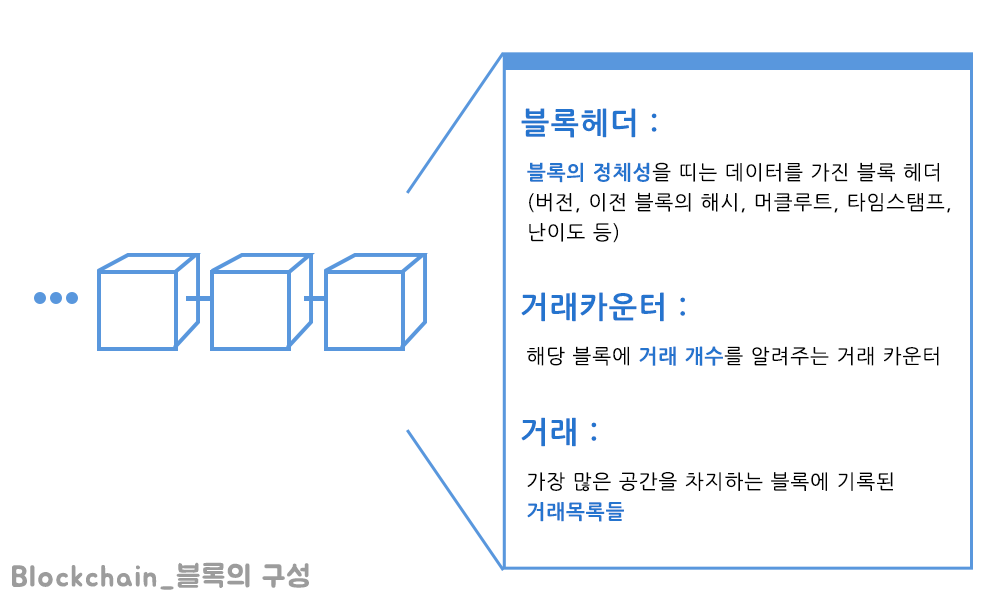
<style>
.page{position:relative;width:1000px;height:600px;background:#ffffff}
.page>*{position:absolute;margin:0}
.t1{font:29.9px "NanumGothicBold";letter-spacing:0.05em;color:#2574ce}
.t2{font:20px/30px "NanumGothic";letter-spacing:0.05em;color:#000000}
.t3{font:20px/30px "NanumGothicBold";letter-spacing:0.05em;color:#2574ce}
.t4{font:20px "NanumGothic";letter-spacing:0.05em;color:#000000}
.t5{font:20px "NanumGothicBold";letter-spacing:0.05em;color:#2574ce}
.t6{font:30px "BMJUAOTF";letter-spacing:0.05em;color:#9c9c9c}
</style>
<div class="page">
<p class="t1" style="left:521px;top:108px;width:136px;height:30px">블록헤더 :</p>
<p class="t2" style="left:527px;top:162px;width:424px;height:81px"><span class="t3">블록의 정체성</span>을 띠는 데이터를 가진 블록 헤더<br>(버전, 이전 블록의 해시, 머클루트, 타임스탬프, <br>난이도 등)</p>
<p class="t1" style="left:521px;top:292px;width:164px;height:30px">거래카운터 :</p>
<p class="t4" style="left:527px;top:346px;width:412px;height:20px">해당 블록에 <span class="t5">거래 개수</span>를 알려주는 거래 카운터</p>
<p class="t1" style="left:521px;top:417px;width:76px;height:30px">거래 :</p>
<p class="t2" style="left:527px;top:472px;width:366px;height:50px">가장 많은 공간을 차지하는 블록에 기록된 <br><span class="t3">거래목록들</span></p>
<p class="t6" style="left:12px;top:562px;width:297px;height:28px">Blockchain_블록의 구성</p>
</div>
